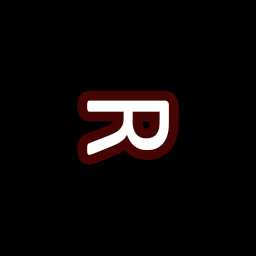
<style>
.page{position:relative;width:256px;height:256px;background:#000000}
.page>*{position:absolute;margin:0}
.t1{font:128px "Calibri";color:#ffffff}
</style>
<div class="page">
<p class="t1" style="left:87px;top:100px;width:82px;height:55px;rotate:90deg">R</p>
</div>
